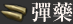
<style>
.page{position:relative;width:73px;height:24px;background:#333333}
.page>*{position:absolute;margin:0}
.t1{font:21px "RyuminPr6N-ExBold";color:#fdf4ef}
</style>
<div class="page">
<p class="t1" style="left:31px;top:2px;width:42px;height:20px">彈藥</p>
</div>
